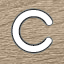
<style>
.page{position:relative;width:64px;height:64px}
.page>*{position:absolute;margin:0}
.t1{font:60px "ArciformSanscyr-lat-Regular";color:#ffffff}
</style>
<div class="page">
<p class="t1" style="left:12px;top:10px;width:41px;height:42px">C</p>
</div>
